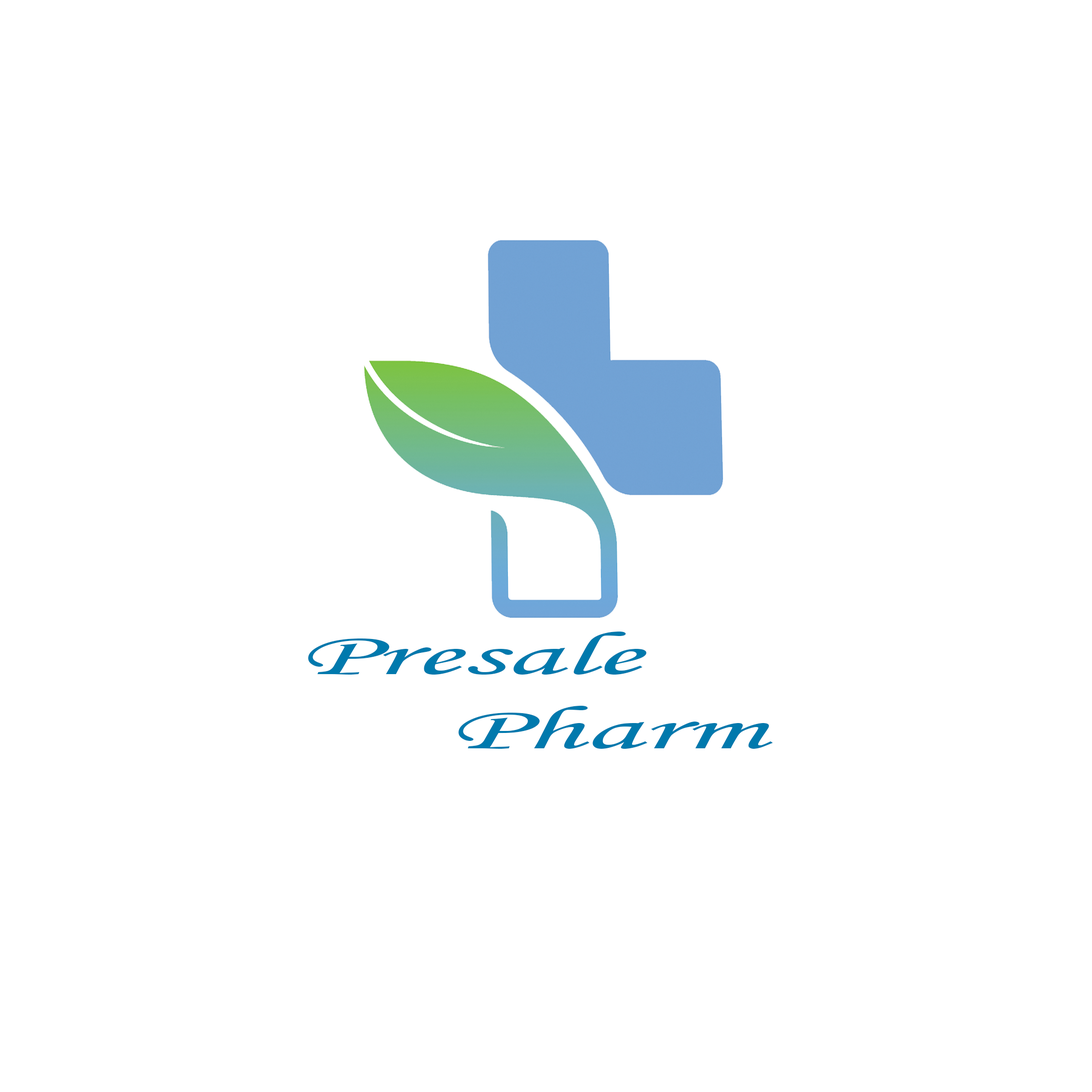
<style>
.page{position:relative;width:1092px;height:1092px;background:#ffffff}
.page>*{position:absolute;margin:0}
.t1{font:61.7px "MonotypeCorsiva";color:#0079ad;scale:2.22 1}
</style>
<div class="page">
<p class="t1" style="left:308px;top:632px;width:465px;height:117px">Presale <br>     Pharm</p>
</div>
